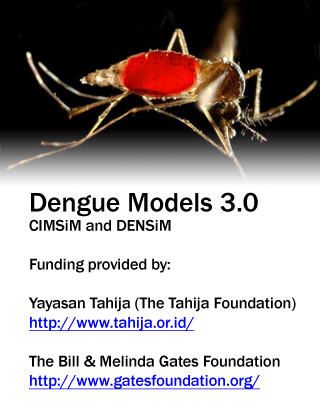
<style>
.page{position:relative;width:320px;height:420px;background:#ffffff}
.page>*{position:absolute;margin:0}
.t1{font:16.1px "FranklinGothic-Medium";color:#000000}
.t2{font:27.7px "FranklinGothic-Medium";color:#000000}
.t3{font:16.1px "FranklinGothic-Medium";color:#0000ee;text-decoration:underline}
</style>
<div class="page">
<p class="t1" style="left:28px;top:192px;width:268px;height:198px"><span class="t2">Dengue Models 3.0<br></span>CIMSiM and DENSiM<br><br>Funding provided by:<br><br>Yayasan Tahija (The Tahija Foundation)<br><span class="t3">http://www.tahija.or.id/<br></span><br>The Bill &amp; Melinda Gates Foundation<br><span class="t3">http://www.gatesfoundation.org/</span></p>
</div>
